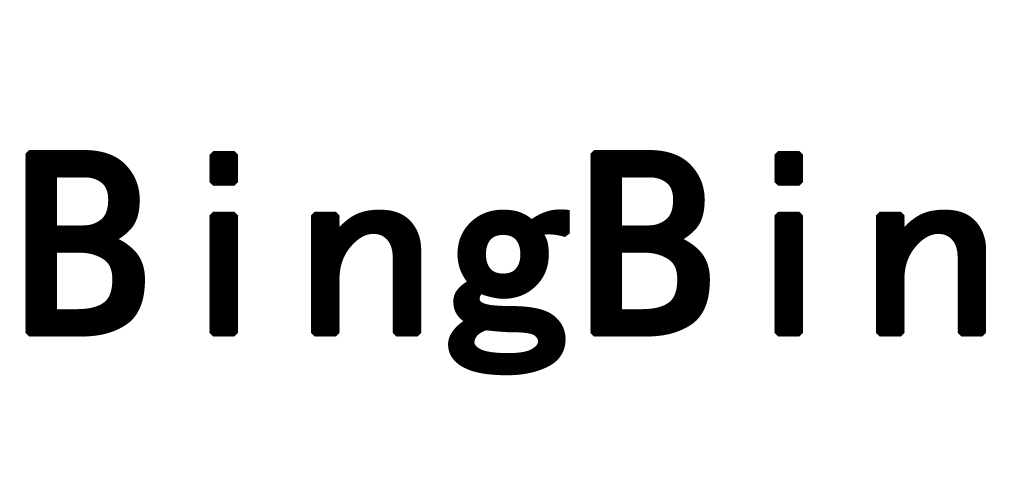
<style>
.page{position:relative;width:1024px;height:500px;background:#ffffff}
.page>*{position:absolute;margin:0}
.t1{font:268px "SimHei";color:#000000;font-weight:bold}
</style>
<div class="page">
<p class="t1" style="left:25px;top:150px;width:961px;height:226px">BingBin</p>
</div>
